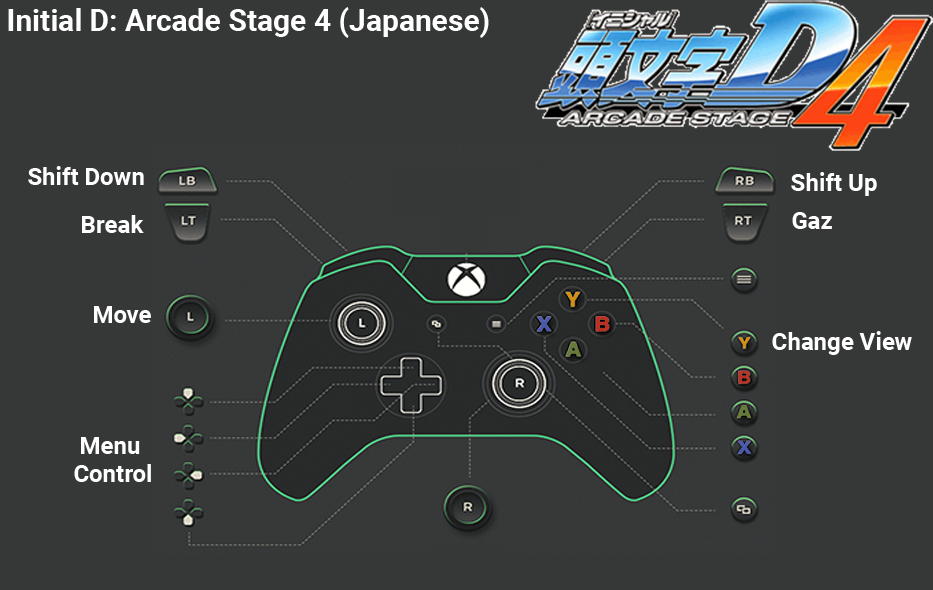
<style>
.page{position:relative;width:933px;height:590px;background:#363838}
.page>*{position:absolute;margin:0}
.t1{font:30px "Roboto-Bold";color:#ffffff}
.t2{font:24px "Roboto-Bold";color:#ffffff}
.t3{font:24px/28px "Roboto-Bold";color:#ffffff}
</style>
<div class="page">
<p class="t1" style="left:8px;top:7px;width:481px;height:31px">Initial D: Arcade Stage 4 (Japanese)</p>
<p class="t2" style="left:28px;top:166px;width:116px;height:19px">Shift Down</p>
<p class="t2" style="left:791px;top:172px;width:86px;height:24px">Shift Up</p>
<p class="t2" style="left:82px;top:215px;width:62px;height:18px">Break</p>
<p class="t2" style="left:792px;top:212px;width:40px;height:17px">Gaz</p>
<p class="t2" style="left:94px;top:306px;width:57px;height:17px">Move</p>
<p class="t2" style="left:772px;top:331px;width:140px;height:24px">Change View</p>
<p class="t3" style="left:74px;top:437px;width:77px;height:45px;text-align:center">Menu <br>Control</p>
</div>
